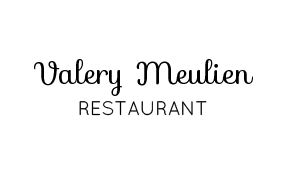
<style>
.page{position:relative;width:288px;height:173px;background:#ffffff}
.page>*{position:absolute;margin:0}
.t1{font:31.1px/46.7px "Sofia-Regular";color:#000000}
.t2{font:19.4px/31.1px "Quicksand-Regular";color:#000000}
</style>
<div class="page">
<p class="t1" style="left:34px;top:59px;width:219px;height:57px;text-align:center">Valery Meulien<br><span class="t2">RESTAURANT</span></p>
</div>
